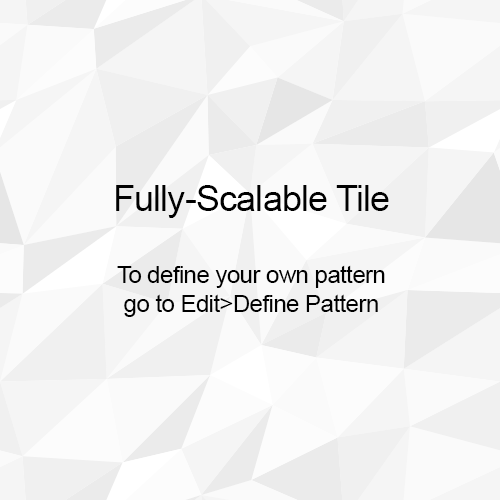
<style>
.page{position:relative;width:500px;height:500px;background:#f5f5f5}
.page>*{position:absolute;margin:0}
.t1{font:24px "ArialMT";letter-spacing:-0.023em;color:#000000}
.t2{font:36px "ArialMT";letter-spacing:-0.023em;color:#000000}
</style>
<div class="page">
<p class="t1" style="left:116px;top:185px;width:273px;height:132px;text-align:center"><span class="t2">Fully-Scalable Tile<br><br></span>To define your own pattern<br>go to Edit&gt;Define Pattern</p>
</div>
